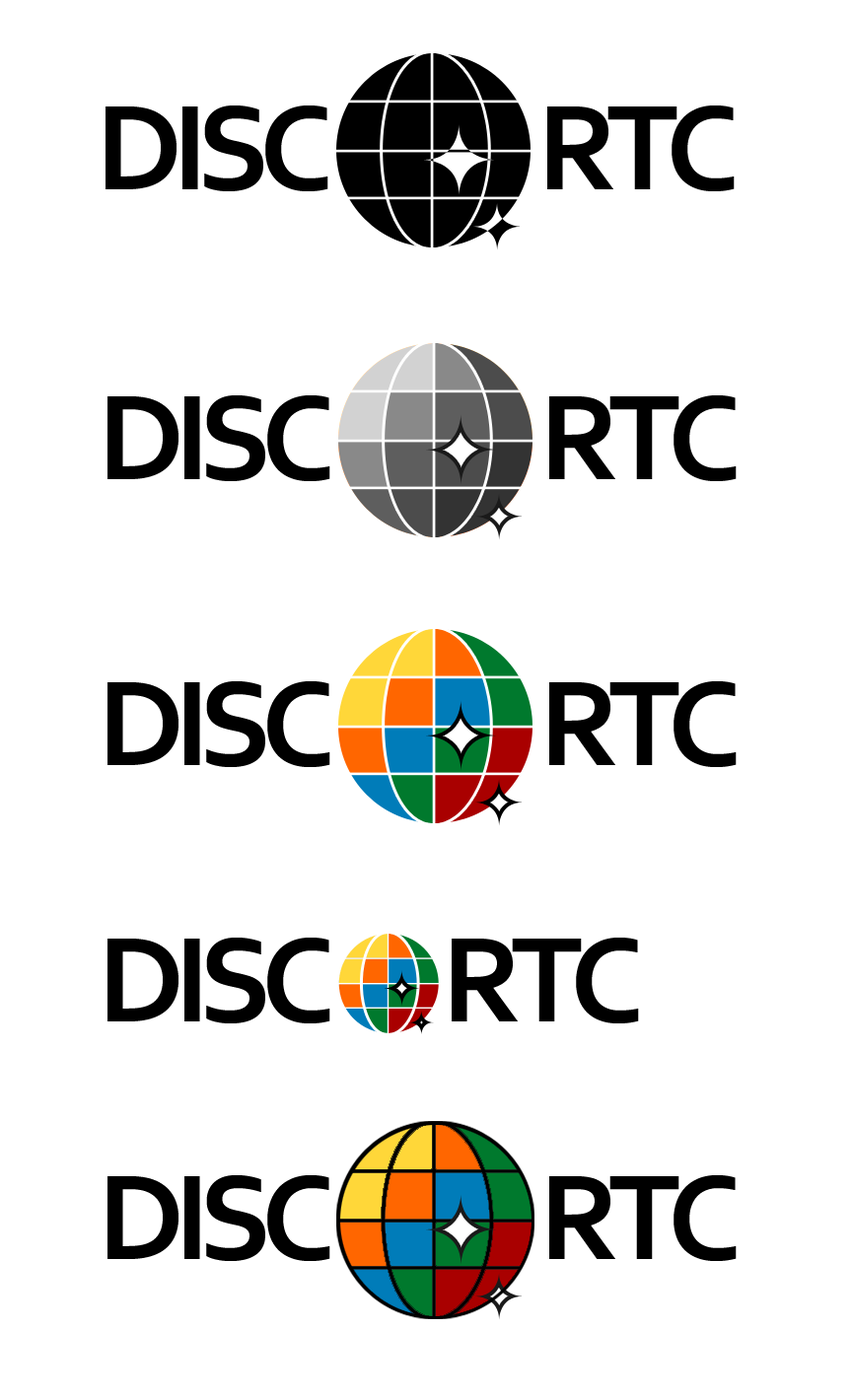
<style>
.page{position:relative;width:852px;height:1400px;background:#ffffff}
.page>*{position:absolute;margin:0}
.t1{font:126.2px "Corbel-Bold";letter-spacing:-0.08em;color:#000000}
</style>
<div class="page">
<p class="t1" style="left:105px;top:105px;width:223px;height:86px">DISC</p>
<p class="t1" style="left:547px;top:105px;width:187px;height:86px">RTC</p>
<p class="t1" style="left:107px;top:395px;width:223px;height:86px">DISC</p>
<p class="t1" style="left:549px;top:395px;width:187px;height:86px">RTC</p>
<p class="t1" style="left:107px;top:681px;width:223px;height:86px">DISC</p>
<p class="t1" style="left:549px;top:681px;width:187px;height:86px">RTC</p>
<p class="t1" style="left:107px;top:938px;width:223px;height:85px">DISC</p>
<p class="t1" style="left:452px;top:938px;width:187px;height:85px">RTC</p>
<p class="t1" style="left:107px;top:1175px;width:223px;height:86px">DISC</p>
<p class="t1" style="left:549px;top:1175px;width:187px;height:86px">RTC</p>
</div>
